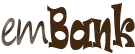
<style>
.page{position:relative;width:135px;height:54px;background:#ffffff}
.page>*{position:absolute;margin:0}
.t1{font:53.5px "Ravie";color:#42290f;scale:0.5 1}
.t2{font:48.6px "SegoePrint";letter-spacing:-0.1em;scale:0.7 1}
</style>
<div class="page">
<p class="t1" style="left:47px;top:3px;width:88px;height:50px">Bank</p>
<p class="t2" style="left:1px;top:18px;width:48px;height:28px">em</p>
</div>
